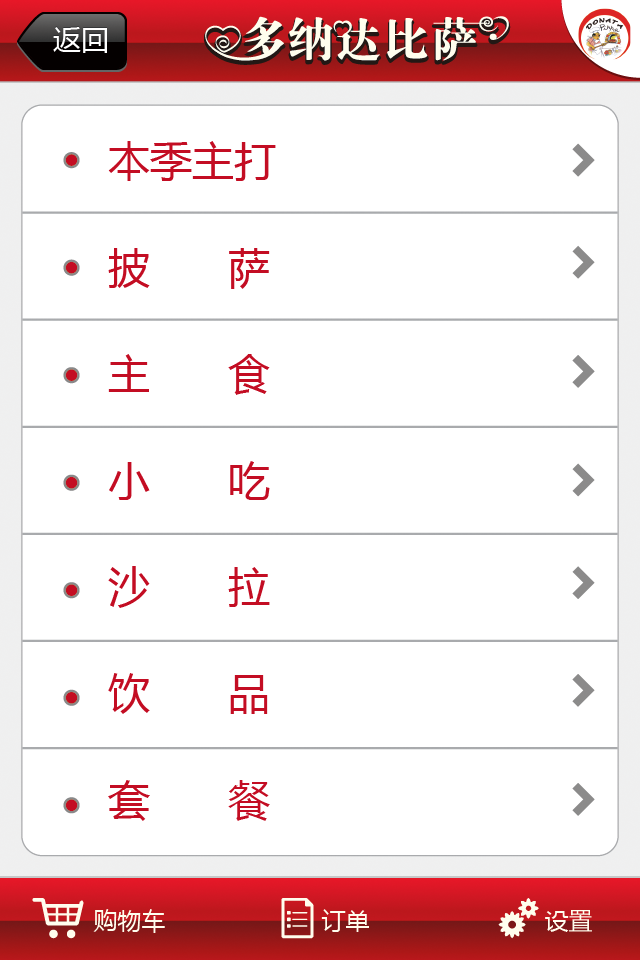
<style>
.page{position:relative;width:640px;height:960px;background:#ffffff}
.page>*{position:absolute;margin:0}
.t1{font:28px "MicrosoftYaHei"}
.t2{font:28px "MicrosoftYaHei";color:#ffffff}
.t3{font:42px/106.4px "MicrosoftYaHei";color:#c30d23}
.t4{font:24px "MicrosoftYaHei";color:#fffeee}
</style>
<div class="page">
<p class="t1" style="left:53px;top:26px;width:54px;height:26px">返回</p>
<p class="t2" style="left:53px;top:27px;width:54px;height:26px">返回</p>
<p class="t3" style="left:108px;top:141px;width:168px;height:680px">本季主打<br>披 萨<br>主 食<br>小 吃<br>沙 拉<br>饮 品<br>套 餐</p>
<p class="t4" style="left:93px;top:909px;width:72px;height:24px">购物车</p>
<p class="t4" style="left:321px;top:909px;width:48px;height:23px">订单</p>
<p class="t4" style="left:545px;top:910px;width:47px;height:22px">设置</p>
</div>
